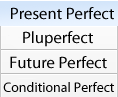
<style>
.page{position:relative;width:118px;height:97px}
.page>*{position:absolute;margin:0}
.t1{font:16.7px "MyriadPro-Regular";color:#000000}
.t2{font:13.9px "MyriadPro-Regular";color:#000000}
</style>
<div class="page">
<p class="t1" style="left:11px;top:7px;width:103px;height:13px">Present Perfect</p>
<p class="t1" style="left:23px;top:31px;width:70px;height:16px">Pluperfect</p>
<p class="t1" style="left:10px;top:56px;width:97px;height:13px">Future Perfect</p>
<p class="t2" style="left:3px;top:82px;width:111px;height:10px">Conditional Perfect</p>
</div>
